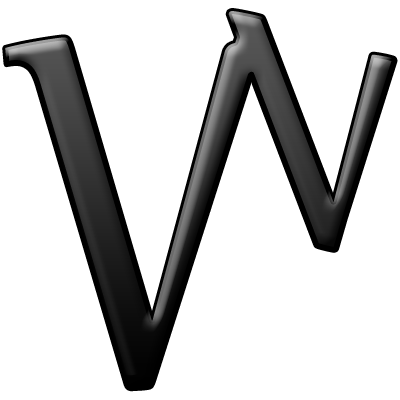
<style>
.page{position:relative;width:400px;height:400px;background:#ffffff}
.page>*{position:absolute;margin:0}
.t1{font:345.6px "Nyala-Regular"}
.t2{font:599.6px "Nyala-Regular";scale:0.76 1}
</style>
<div class="page">
<p class="t1" style="left:184px;top:11px;width:211px;height:239px;rotate:16deg">N</p>
<p class="t2" style="left:5px;top:37px;width:256px;height:352px">V</p>
</div>
